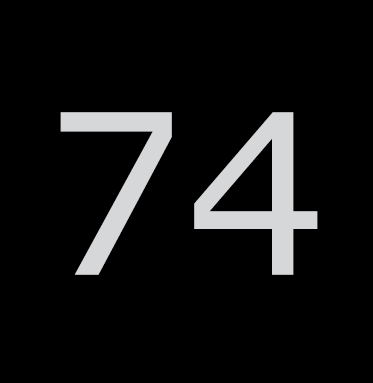
<style>
.page{position:relative;width:373px;height:383px;background:#000000}
.page>*{position:absolute;margin:0}
.t1{font:223.1px "Verdana";color:#d5d7d8}
</style>
<div class="page">
<p class="t1" style="left:60px;top:112px;width:258px;height:163px">74</p>
</div>
